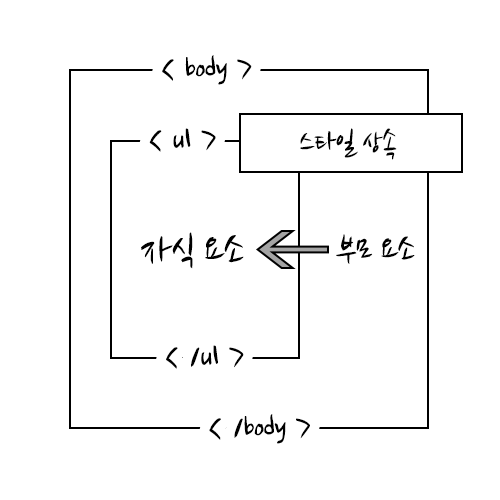
<style>
.page{position:relative;width:500px;height:500px;background:#ffffff}
.page>*{position:absolute;margin:0}
.t1{font:36.2px "NanumBrush";letter-spacing:-0.05em;color:#000000;font-weight:bold}
.t2{font:31.1px "NanumBrush";letter-spacing:-0.05em;color:#000000;font-weight:bold}
.t3{font:42.3px "NanumBrush";letter-spacing:-0.05em;color:#000000;font-weight:bold}
</style>
<div class="page">
<p class="t1" style="left:162px;top:55px;width:90px;height:30px">&lt; body &gt;</p>
<p class="t1" style="left:149px;top:128px;width:67px;height:24px">&lt; ul &gt;</p>
<p class="t2" style="left:300px;top:128px;width:97px;height:32px">스타일 상속</p>
<p class="t3" style="left:141px;top:232px;width:103px;height:37px">자식 요소</p>
<p class="t1" style="left:336px;top:234px;width:79px;height:30px">부모 요소</p>
<p class="t1" style="left:166px;top:345px;width:78px;height:24px">&lt; /ul &gt;</p>
<p class="t1" style="left:209px;top:414px;width:101px;height:30px">&lt; /body &gt;</p>
</div>
